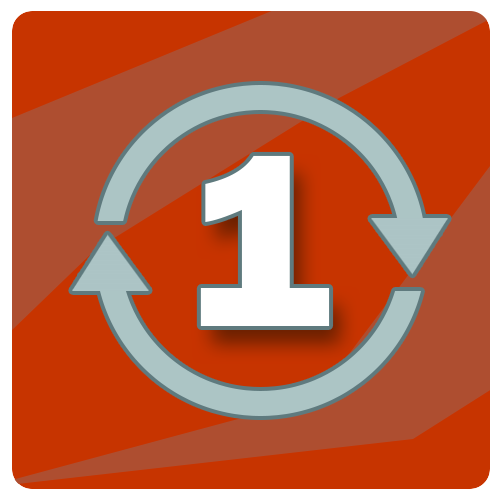
<style>
.page{position:relative;width:500px;height:500px;background:#c73400}
.page>*{position:absolute;margin:0}
.t1{font:250px "FranklinGothic-Heavy";letter-spacing:0.11em;color:#ffffff}
</style>
<div class="page">
<p class="t1" style="left:200px;top:155px;width:130px;height:171px">1</p>
</div>
